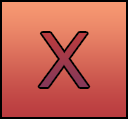
<style>
.page{position:relative;width:128px;height:119px}
.page>*{position:absolute;margin:0}
.t1{font:75px "ArialMT"}
</style>
<div class="page">
<p class="t1" style="left:39px;top:33px;width:50px;height:54px">X</p>
</div>
